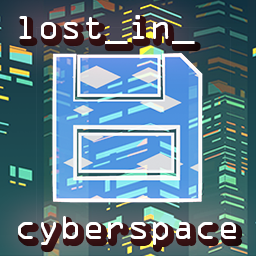
<style>
.page{position:relative;width:256px;height:256px}
.page>*{position:absolute;margin:0}
.t1{font:31.2px/40px "OCRAStd";color:#ffffff}
</style>
<div class="page">
<p class="t1" style="left:18px;top:15px;width:218px;height:230px;text-align:right">lost_in_<br><br><br><br><br>cyberspace</p>
</div>
